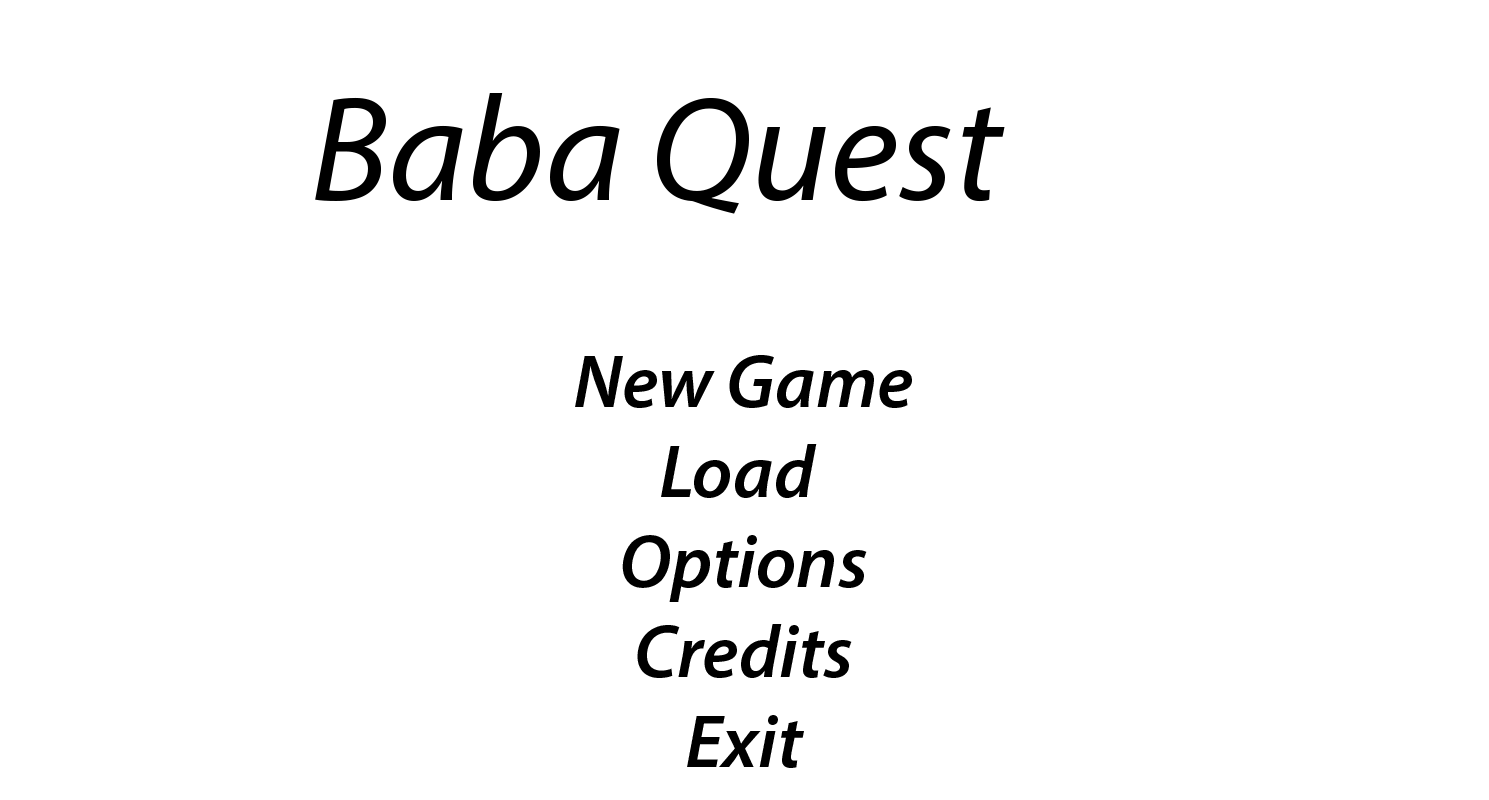
<style>
.page{position:relative;width:1489px;height:800px;background:#ffffff}
.page>*{position:absolute;margin:0}
.t1{font:150px "MyriadPro-It";color:#000000}
.t2{font:75px "MyriadPro-SemiboldIt";color:#000000}
</style>
<div class="page">
<p class="t1" style="left:315px;top:93px;width:690px;height:121px">Baba Quest</p>
<p class="t2" style="left:575px;top:355px;width:337px;height:413px;text-align:center">New Game<br>Load <br>Options<br>Credits<br>Exit</p>
</div>
